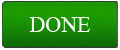
<style>
.page{position:relative;width:120px;height:50px}
.page>*{position:absolute;margin:0}
.t1{font:22px "TimesNewRomanPSMT";color:#ffffff}
</style>
<div class="page">
<p class="t1" style="left:29px;top:17px;width:61px;height:15px">DONE</p>
</div>
